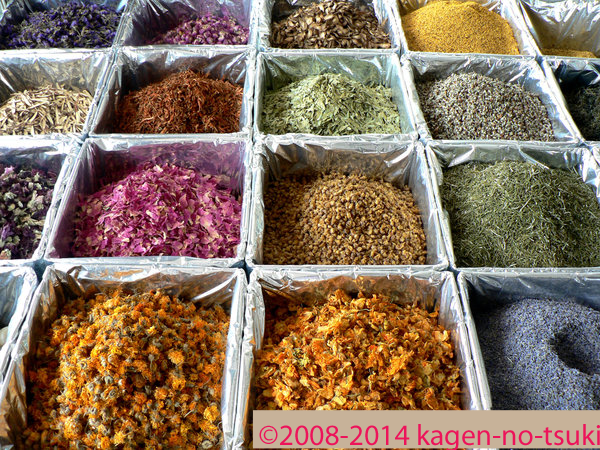
<style>
.page{position:relative;width:600px;height:450px}
.page>*{position:absolute;margin:0}
.t1{font:29.7px "MyriadPro-Regular";color:#ed135a}
</style>
<div class="page">
<p class="t1" style="left:259px;top:424px;width:341px;height:28px">©2008-2014 kagen-no-tsuki</p>
</div>
